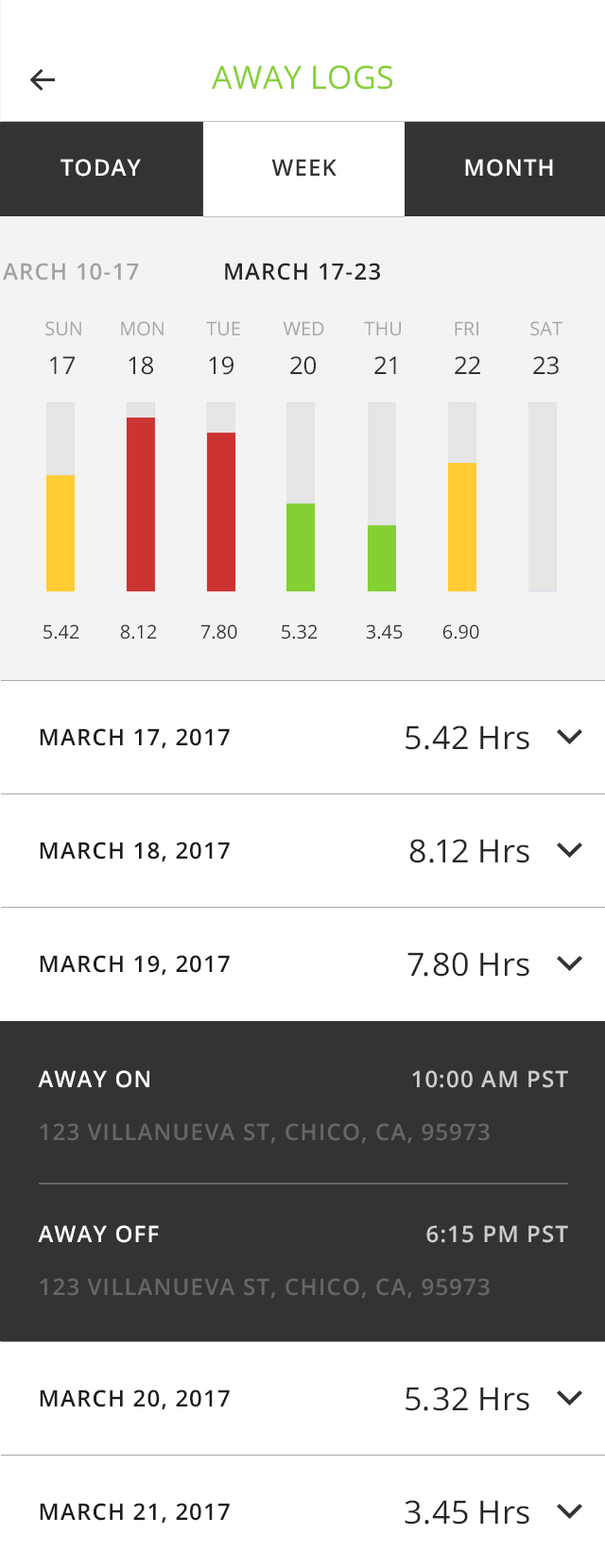
<style>
.page{position:relative;width:605px;height:1568px;background:#ffffff}
.page>*{position:absolute;margin:0}
.t1{font:32.1px "OpenSans";letter-spacing:0.01em;color:#84d033;text-transform:uppercase}
.t2{font:22.7px "OpenSans-Semibold";letter-spacing:0.05em;color:#ffffff;text-transform:uppercase}
.t3{font:22.7px "OpenSans-Semibold";letter-spacing:0.05em;color:#333333;text-transform:uppercase}
.t4{font:22.7px "OpenSans-Semibold";letter-spacing:0.05em;color:#262626;text-transform:uppercase}
.t5{font:18.9px "OpenSans";color:#a5a5a5}
.t6{font:24.4px "OpenSans";color:#333333}
.t7{font:18.9px "OpenSans";color:#333333}
.t8{font:32.1px "OpenSans";color:#262626}
.t9{font:22.7px "OpenSans-Semibold";letter-spacing:0.05em;color:#1c1c1c;text-transform:uppercase}
.t10{font:22.7px/52.9px "OpenSans-Semibold";letter-spacing:0.05em;color:#666666;text-transform:uppercase}
.t11{font:22.7px/52.9px "OpenSans-Semibold";letter-spacing:0.05em;color:#ffffff;text-transform:uppercase}
.t12{font:22.7px "OpenSans-Semibold";letter-spacing:0.05em;color:#cccccc;text-transform:uppercase}
</style>
<div class="page">
<p class="t1" style="left:212px;top:65px;width:180px;height:25px">AWAY LOGS</p>
<p class="t2" style="left:60px;top:159px;width:81px;height:18px">today</p>
<p class="t3" style="left:271px;top:159px;width:65px;height:17px">week</p>
<p class="t2" style="left:465px;top:159px;width:88px;height:18px">month</p>
<p class="t4" style="left:225px;top:263px;width:155px;height:18px">march 17-23</p>
<p class="t5" style="left:45px;top:321px;width:36px;height:15px">SUN</p>
<p class="t5" style="left:121px;top:321px;width:42px;height:15px">MON</p>
<p class="t5" style="left:206px;top:321px;width:34px;height:15px">TUE</p>
<p class="t5" style="left:282px;top:321px;width:42px;height:14px">WED</p>
<p class="t5" style="left:364px;top:321px;width:37px;height:15px">THU</p>
<p class="t5" style="left:454px;top:321px;width:24px;height:14px">FRI</p>
<p class="t5" style="left:530px;top:321px;width:32px;height:15px">SAT</p>
<p class="t6" style="left:50px;top:356px;width:25px;height:18px">17</p>
<p class="t6" style="left:128px;top:356px;width:25px;height:19px">18</p>
<p class="t6" style="left:209px;top:356px;width:24px;height:19px">19</p>
<p class="t6" style="left:290px;top:356px;width:25px;height:19px">20</p>
<p class="t6" style="left:374px;top:356px;width:22px;height:18px">21</p>
<p class="t6" style="left:454px;top:356px;width:26px;height:18px">22</p>
<p class="t6" style="left:533px;top:356px;width:25px;height:19px">23</p>
<p class="t7" style="left:43px;top:624px;width:36px;height:15px">5.42</p>
<p class="t7" style="left:120px;top:624px;width:37px;height:15px">8.12</p>
<p class="t7" style="left:200px;top:624px;width:37px;height:15px">7.80</p>
<p class="t7" style="left:281px;top:624px;width:36px;height:15px">5.32</p>
<p class="t7" style="left:366px;top:624px;width:36px;height:15px">3.45</p>
<p class="t7" style="left:443px;top:624px;width:36px;height:15px">6.90</p>
<p class="t8" style="left:405px;top:725px;width:124px;height:25px">5.42 Hrs</p>
<p class="t9" style="left:40px;top:728px;width:190px;height:21px">MARCH 17, 2017</p>
<p class="t9" style="left:40px;top:842px;width:190px;height:20px">MARCH 18, 2017</p>
<p class="t8" style="left:409px;top:839px;width:120px;height:24px">8.12 Hrs</p>
<p class="t8" style="left:407px;top:952px;width:122px;height:25px">7.80 Hrs</p>
<p class="t9" style="left:40px;top:955px;width:190px;height:21px">MARCH 19, 2017</p>
<p class="t10" style="left:38px;top:1070px;width:451px;height:74px"><span class="t11">AWAY ON<br></span>123 VILLANUEVA St, Chico, CA, 95973</p>
<p class="t12" style="left:412px;top:1070px;width:156px;height:18px">10:00 AM PST</p>
<p class="t10" style="left:38px;top:1225px;width:451px;height:74px"><span class="t11">AWAY OFF<br></span>123 VILLANUEVA St, Chico, CA, 95973</p>
<p class="t12" style="left:426px;top:1225px;width:142px;height:18px">6:15 PM PST</p>
<p class="t9" style="left:40px;top:1389px;width:190px;height:21px">MARCH 20, 2017</p>
<p class="t8" style="left:405px;top:1387px;width:124px;height:24px">5.32 Hrs</p>
<p class="t9" style="left:40px;top:1503px;width:190px;height:21px">MARCH 21, 2017</p>
<p class="t8" style="left:404px;top:1500px;width:125px;height:25px">3.45 Hrs</p>
</div>
